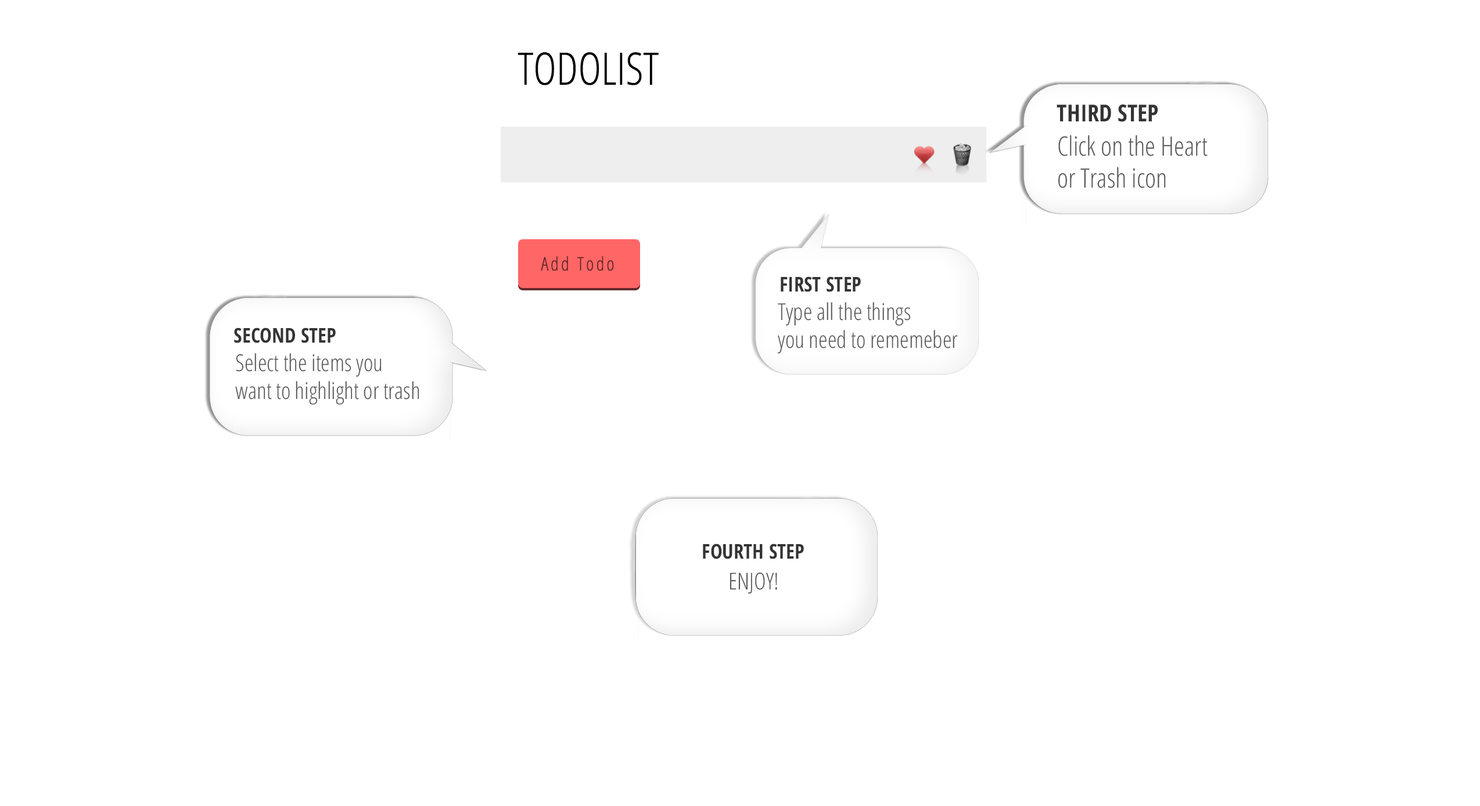
<style>
.page{position:relative;width:1480px;height:806px;background:#ffffff}
.page>*{position:absolute;margin:0}
.t1{font:23.3px "OpenSans-CondensedBold";color:#343434}
.t2{font:26.7px "OpenSans-CondensedLight";color:#585858}
.t3{font:20.3px "OpenSans-CondensedBold";color:#343434}
.t4{font:23.2px "OpenSans-CondensedLight";color:#585858}
</style>
<div class="page">
<p class="t1" style="left:1056px;top:104px;width:102px;height:18px">THIRD STEP</p>
<p class="t2" style="left:1057px;top:135px;width:150px;height:53px">Click on the Heart <br>or Trash icon</p>
<p class="t3" style="left:780px;top:276px;width:81px;height:16px">FIRST STEP</p>
<p class="t4" style="left:777px;top:302px;width:181px;height:52px">Type all the things <br>you need to rememeber</p>
<p class="t3" style="left:234px;top:327px;width:102px;height:16px">SECOND STEP</p>
<p class="t4" style="left:235px;top:353px;width:184px;height:52px">Select the items you <br>want to highlight or trash</p>
<p class="t3" style="left:703px;top:543px;width:101px;height:16px">FOURTH STEP</p>
<p class="t4" style="left:729px;top:572px;width:48px;height:22px">ENJOY!</p>
</div>
